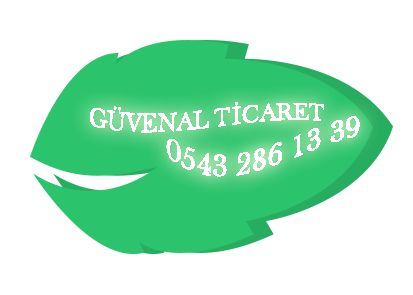
<style>
.page{position:relative;width:413px;height:295px;background:#ffffff}
.page>*{position:absolute;margin:0}
.t1{font:25px "FrysBaskervilleBT-Roman";color:#ffffff}
.t2{font:30.5px "FrysBaskervilleBT-Roman";color:#ffffff}
</style>
<div class="page">
<p class="t1" style="left:90px;top:102px;width:234px;height:31px">GÜVENAL TİCARET</p>
<p class="t2" style="left:166px;top:116px;width:194px;height:61px">0543 286 13 39</p>
</div>
